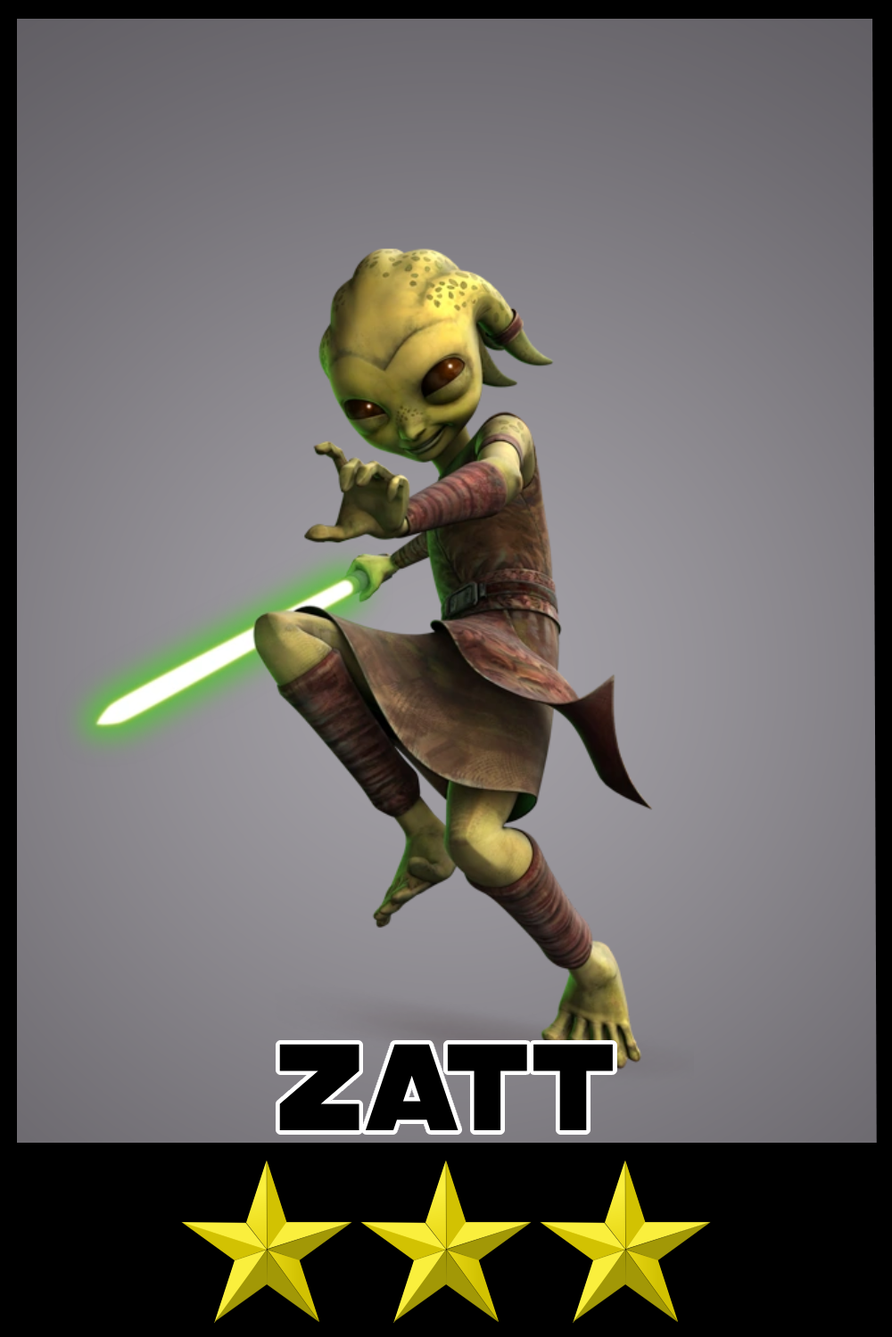
<style>
.page{position:relative;width:892px;height:1337px}
.page>*{position:absolute;margin:0}
.t1{font:131.9px "DistantGalaxy";color:#000000}
</style>
<div class="page">
<p class="t1" style="left:279px;top:1044px;width:334px;height:87px">zatt</p>
</div>
